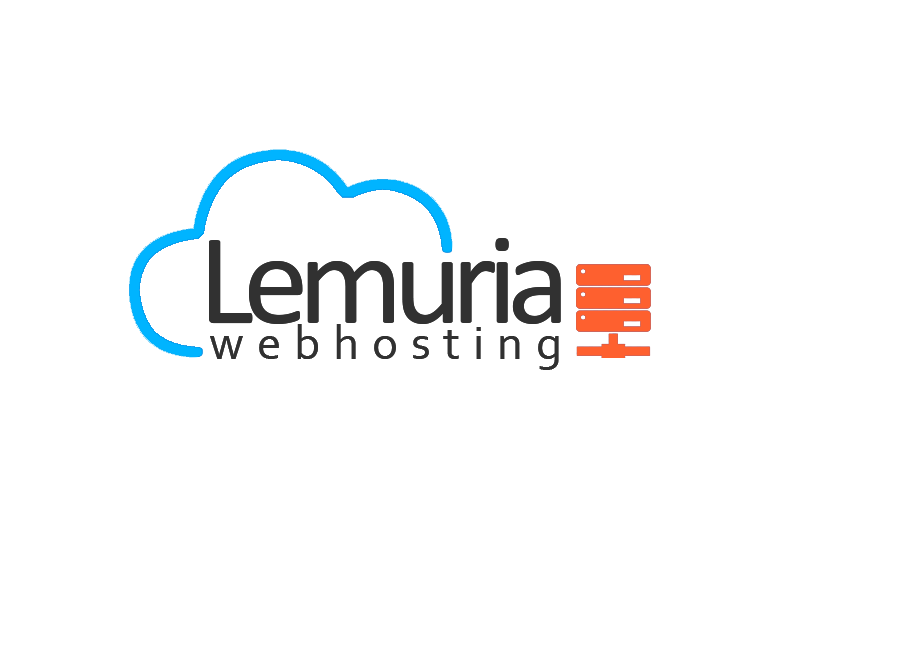
<style>
.page{position:relative;width:900px;height:660px;background:#ffffff}
.page>*{position:absolute;margin:0}
.t1{font:132px "Calibri";letter-spacing:-0.08em;color:#313131}
.t2{font:49px "Corbel";letter-spacing:0.26em;color:#313131}
</style>
<div class="page">
<p class="t1" style="left:209px;top:238px;width:352px;height:86px">Lemuria</p>
<p class="t2" style="left:210px;top:324px;width:349px;height:46px">webhosting</p>
</div>
